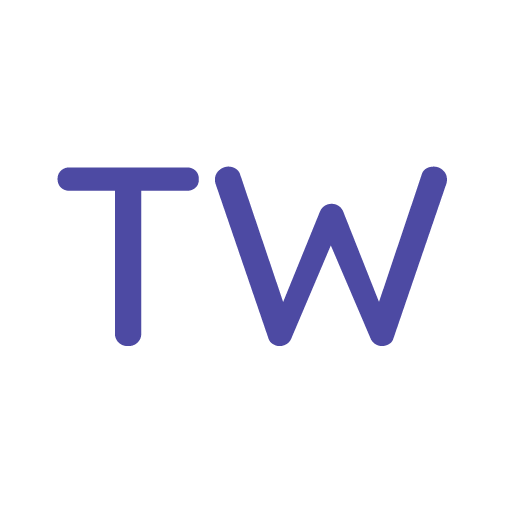
<style>
.page{position:relative;width:512px;height:512px;background:#ffffff}
.page>*{position:absolute;margin:0}
.t1{font:255px "Quicksand-Medium";color:#4d4aa3}
</style>
<div class="page">
<p class="t1" style="left:57px;top:166px;width:390px;height:180px">TW</p>
</div>
